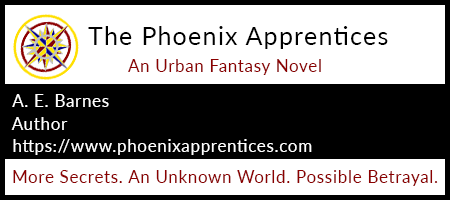
<style>
.page{position:relative;width:450px;height:200px;background:#ffffff}
.page>*{position:absolute;margin:0}
.t1{font:25px "Lato-Regular";letter-spacing:0.05em;color:#000000}
.t2{font:16.7px "Lato-Regular";letter-spacing:0.05em;color:#8b0000}
.t3{font:16.7px "Lato-Regular";letter-spacing:0.05em;color:#ffffff}
</style>
<div class="page">
<p class="t1" style="left:88px;top:26px;width:300px;height:23px">The Phoenix Apprentices</p>
<p class="t2" style="left:128px;top:59px;width:193px;height:16px">An Urban Fantasy Novel</p>
<p class="t3" style="left:12px;top:94px;width:97px;height:13px">A. E. Barnes</p>
<p class="t3" style="left:11px;top:117px;width:57px;height:13px">Author</p>
<p class="t3" style="left:13px;top:139px;width:299px;height:16px">https://www.phoenixapprentices.com</p>
<p class="t2" style="left:13px;top:170px;width:425px;height:16px">More Secrets. An Unknown World. Possible Betrayal.</p>
</div>
